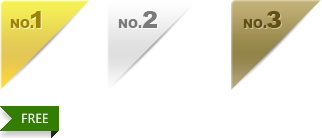
<style>
.page{position:relative;width:322px;height:138px;background:#ffffff}
.page>*{position:absolute;margin:0}
.t1{font:23.2px "Arial-Black";color:#7a7a7a;scale:1.03 1}
.t2{font:23.2px "Arial-Black";color:#615110;scale:1.03 1}
.t3{font:12px "Arial-Black";color:#7b7b7b}
.t4{font:12px "Arial-Black";color:#615110}
.t5{font:12px "MicrosoftYaHei";color:#ffffff}
</style>
<div class="page">
<p class="t1" style="left:142px;top:11px;width:15px;height:17px">2</p>
<p class="t2" style="left:266px;top:11px;width:15px;height:17px">3</p>
<p class="t3" style="left:118px;top:19px;width:24px;height:9px">NO.</p>
<p class="t4" style="left:243px;top:19px;width:24px;height:9px">NO.</p>
<p class="t5" style="left:22px;top:113px;width:26px;height:10px">FREE</p>
</div>
